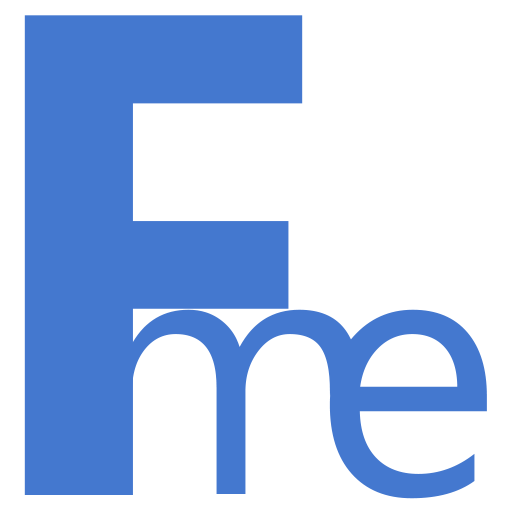
<style>
.page{position:relative;width:512px;height:512px;background:#ffffff}
.page>*{position:absolute;margin:0}
.t1{font:684.9px "SegoeUI-Bold";color:#4478cf;text-transform:uppercase}
.t2{font:359.6px "SegoeUI";letter-spacing:-0.2em;color:#4478cf}
</style>
<div class="page">
<p class="t1" style="left:24px;top:15px;width:279px;height:480px">F</p>
<p class="t2" style="left:103px;top:309px;width:256px;height:185px">m</p>
<p class="t2" style="left:329px;top:309px;width:158px;height:190px">e</p>
</div>
